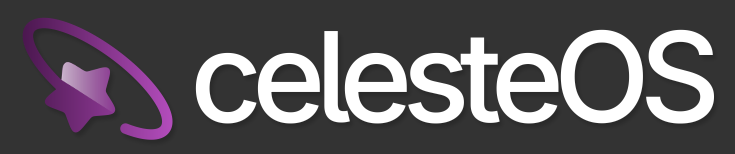
<style>
.page{position:relative;width:735px;height:154px;background:#333333}
.page>*{position:absolute;margin:0}
.t1{font:125px "AdwaitaSans-Medium";letter-spacing:-0.081em;color:#ffffff}
</style>
<div class="page">
<p class="t1" style="left:194px;top:29px;width:522px;height:96px">celesteOS</p>
</div>
